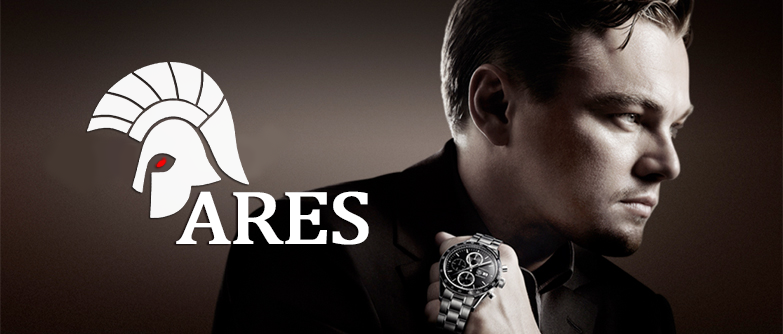
<style>
.page{position:relative;width:783px;height:334px}
.page>*{position:absolute;margin:0}
.t1{font:76.3px "CambriaMath";letter-spacing:-0.04em;color:#ffffff;font-weight:bold;scale:1.12 1}
</style>
<div class="page">
<p class="t1" style="left:176px;top:191px;width:193px;height:54px">ARES</p>
</div>
